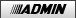
<style>
.page{position:relative;width:76px;height:18px}
.page>*{position:absolute;margin:0}
.t1{font:12px "BamfItalic";color:#000000}
</style>
<div class="page">
<p class="t1" style="left:10px;top:4px;width:57px;height:10px">Admin</p>
</div>
